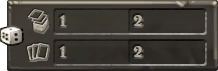
<style>
.page{position:relative;width:218px;height:71px}
.page>*{position:absolute;margin:0}
.t1{font:18px "BelweBT-Bold";color:#ada795}
.t2{font:18px "BelweBT-Bold";color:#afa897}
</style>
<div class="page">
<p class="t1" style="left:60px;top:15px;width:6px;height:11px">1</p>
<p class="t2" style="left:133px;top:15px;width:9px;height:11px">2</p>
<p class="t1" style="left:60px;top:46px;width:6px;height:11px">1</p>
<p class="t2" style="left:133px;top:46px;width:9px;height:11px">2</p>
</div>
